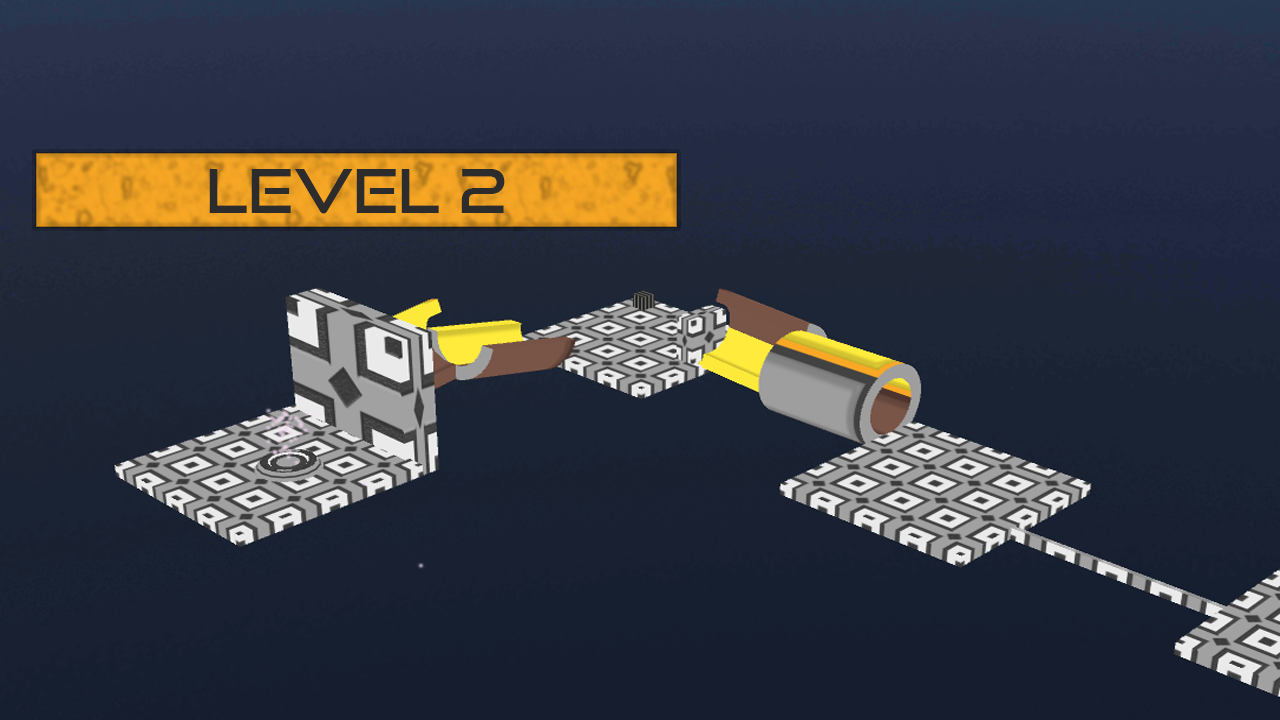
<style>
.page{position:relative;width:1280px;height:720px}
.page>*{position:absolute;margin:0}
.t1{font:60px "GoodTimesRg-Regular";color:#2d2c2c}
</style>
<div class="page">
<p class="t1" style="left:209px;top:169px;width:296px;height:45px">LEVEL 2</p>
</div>
